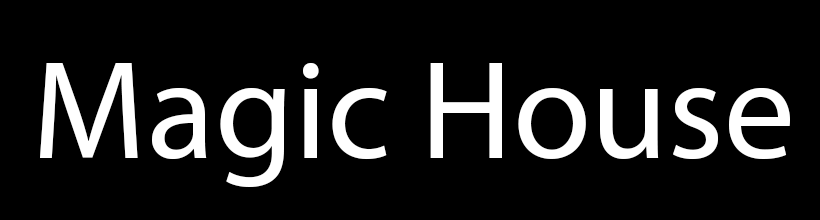
<style>
.page{position:relative;width:820px;height:220px;background:#000000}
.page>*{position:absolute;margin:0}
.t1{font:141.7px "MyriadPro-Regular";color:#ffffff}
</style>
<div class="page">
<p class="t1" style="left:40px;top:62px;width:750px;height:125px">Magic House</p>
</div>
